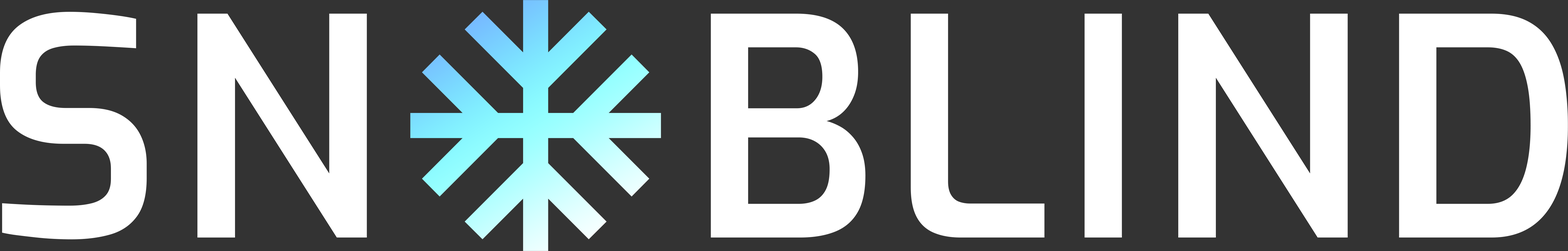
<style>
.page{position:relative;width:1568px;height:251px;background:#333333}
.page>*{position:absolute;margin:0}
.t1{font:303px "Exo-SemiBold";letter-spacing:0.04em;color:#ffffff}
</style>
<div class="page">
<p class="t1" style="left:0px;top:12px;width:1568px;height:227px">SN   BLIND</p>
</div>
